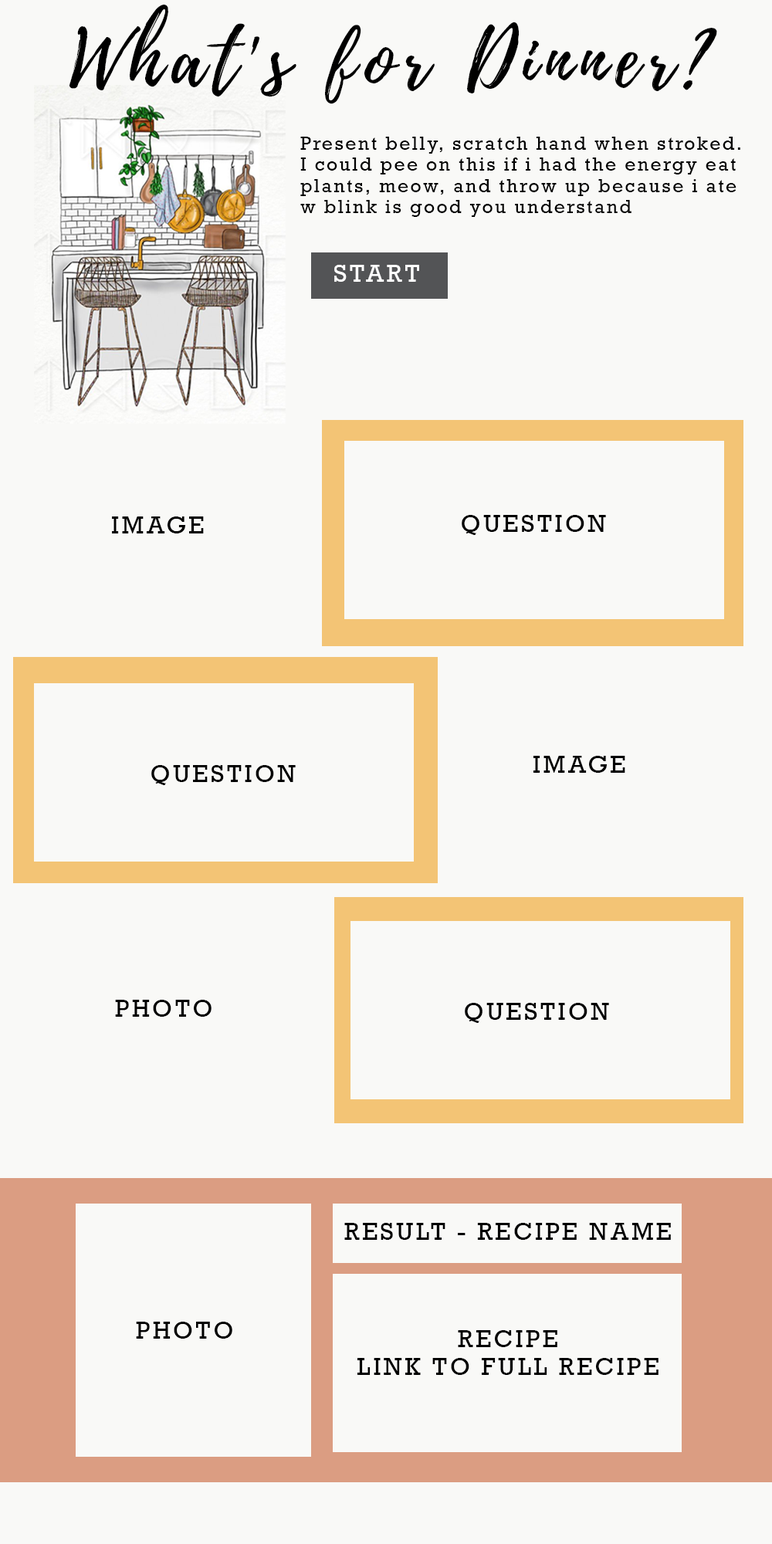
<style>
.page{position:relative;width:772px;height:1544px;background:#f9f9f7}
.page>*{position:absolute;margin:0}
.t1{font:77.2px "Playlist-Script";letter-spacing:0.11em;color:#000000}
.t2{font:17.5px "Rockwell-Regular";letter-spacing:0.11em;color:#000000}
.t3{font:23.2px "Rockwell-Regular";letter-spacing:0.11em;color:#ffffff}
.t4{font:23.2px "Rockwell-Regular";letter-spacing:0.11em;color:#000000}
</style>
<div class="page">
<p class="t1" style="left:69px;top:5px;width:648px;height:99px">What's for Dinner?</p>
<p class="t2" style="left:300px;top:137px;width:440px;height:80px">Present belly, scratch hand when stroked. <br>I could pee on this if i had the energy eat <br>plants, meow, and throw up because i ate <br>w blink is good you understand</p>
<p class="t3" style="left:334px;top:265px;width:85px;height:17px">START</p>
<p class="t4" style="left:112px;top:517px;width:92px;height:17px">IMAGE</p>
<p class="t4" style="left:462px;top:515px;width:144px;height:20px">QUESTION</p>
<p class="t4" style="left:534px;top:756px;width:91px;height:17px">IMAGE</p>
<p class="t4" style="left:151px;top:765px;width:145px;height:20px">QUESTION</p>
<p class="t4" style="left:115px;top:1000px;width:97px;height:17px">PHOTO</p>
<p class="t4" style="left:465px;top:1003px;width:144px;height:20px">QUESTION</p>
<p class="t4" style="left:344px;top:1223px;width:327px;height:17px">RESULT - RECIPE NAME</p>
<p class="t4" style="left:136px;top:1322px;width:96px;height:17px">PHOTO</p>
<p class="t4" style="left:358px;top:1330px;width:301px;height:45px;text-align:center">RECIPE<br>LINK TO FULL RECIPE</p>
</div>
